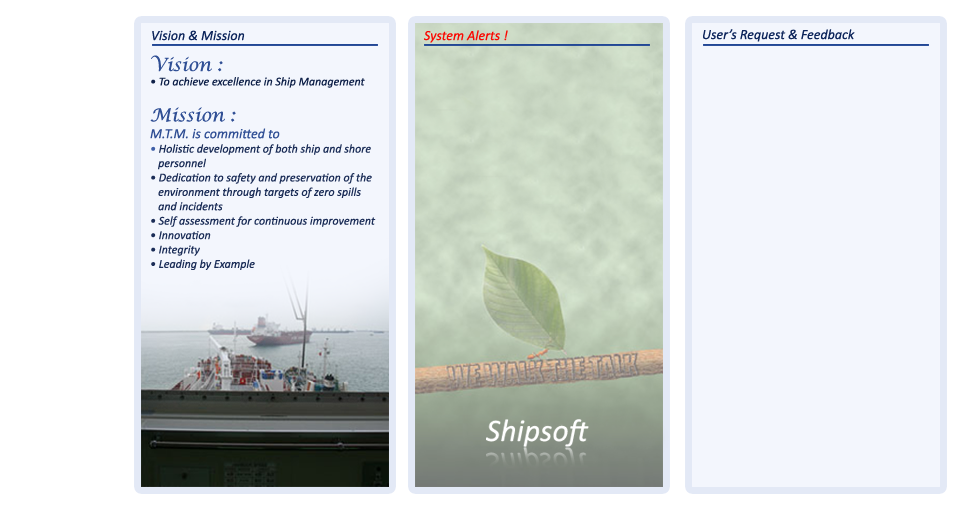
<style>
.page{position:relative;width:960px;height:520px;background:#f3f6fd}
.page>*{position:absolute;margin:0}
.t1{font:14px "Calibri-Italic";color:#0d255b}
.t2{font:14px "Calibri-Italic";color:#fa0903}
.t3{font:12px "Calibri-Italic";color:#1b2d57}
.t4{font:18px "LucidaCalligraphy-Italic";color:#304f95}
.t5{font:12px "Calibri-Italic";color:#0f2149}
.t6{font:14px "Calibri-Italic";color:#304f95}
.t7{font:12px "Calibri-Italic";color:#4060a8}
</style>
<div class="page">
<p class="t1" style="left:152px;top:30px;width:93px;height:11px">Vision &amp; Mission</p>
<p class="t2" style="left:424px;top:30px;width:84px;height:13px">System Alerts !</p>
<p class="t1" style="left:703px;top:29px;width:152px;height:13px">User’s Request &amp; Feedback</p>
<p class="t3" style="left:150px;top:55px;width:226px;height:215px"><span class="t4">Vision :<br></span><span class="t5">• To achieve excellence in Ship Management<br> <br></span><span class="t4">Mission :<br></span><span class="t6">M.T.M. is committed to<br></span><span class="t7">•</span> Holistic development of both ship and shore<br>   personnel<br>• Dedication to safety and preservation of the<br>   environment through targets of zero spills <br>   and incidents<br>• Self assessment for continuous improvement<br>• Innovation<br>• Integrity<br>• Leading by Example</p>
</div>
